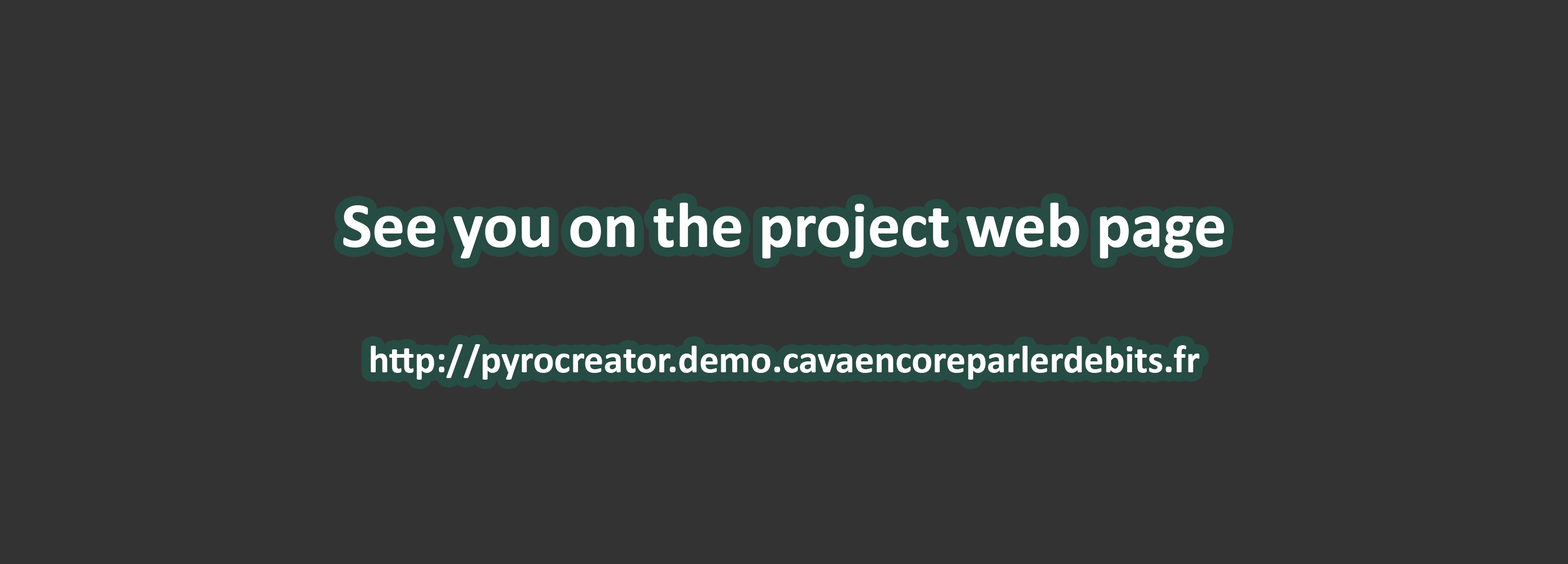
<style>
.page{position:relative;width:1568px;height:564px;background:#333333}
.page>*{position:absolute;margin:0}
.t1{font:39.2px "Calibri-Bold";color:#ffffff}
.t2{font:65.3px "Calibri-Bold";color:#ffffff}
</style>
<div class="page">
<p class="t1" style="left:343px;top:203px;width:881px;height:177px;text-align:center"><span class="t2">See you on the project web page<br><br></span>http://pyrocreator.demo.cavaencoreparlerdebits.fr</p>
</div>
